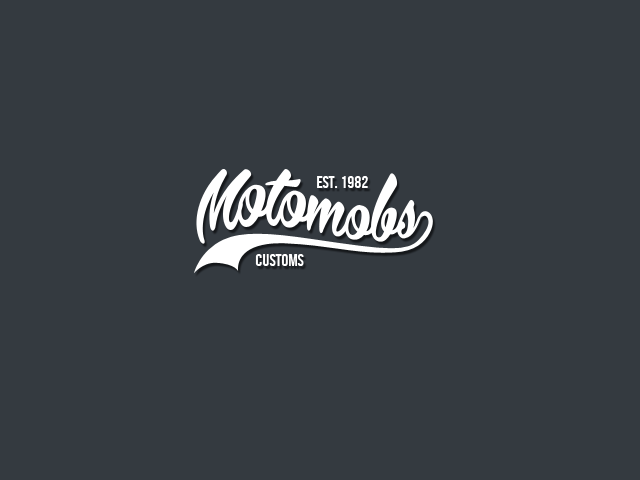
<style>
.page{position:relative;width:640px;height:480px;background:#343a40}
.page>*{position:absolute;margin:0}
.t1{font:17px "BebasNeue";color:#ffffff}
</style>
<div class="page">
<p class="t1" style="left:317px;top:176px;width:51px;height:12px">Est. 1982</p>
<p class="t1" style="left:255px;top:254px;width:49px;height:12px">Customs</p>
</div>
